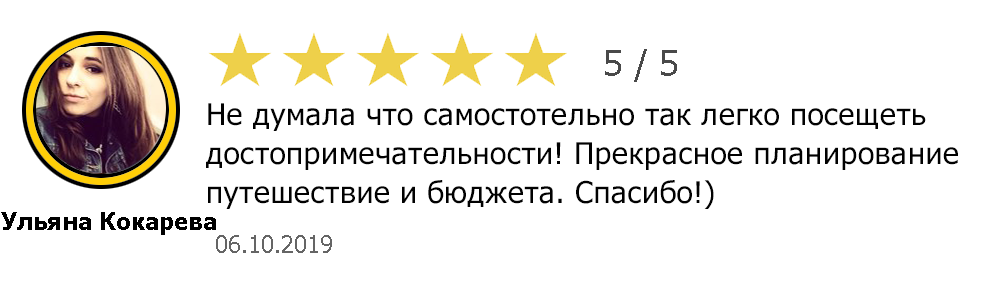
<style>
.page{position:relative;width:1001px;height:287px;background:#ffffff}
.page>*{position:absolute;margin:0}
.t1{font:36px "Tahoma";color:#494949}
.t2{font:30px/19.5px "Tahoma";letter-spacing:0.02em;color:#010101}
.t3{font:24px "Tahoma-Bold";color:#000000}
.t4{font:24px "Tahoma";color:#656565}
</style>
<div class="page">
<p class="t1" style="left:605px;top:49px;width:72px;height:33px">5 / 5</p>
<p class="t2" style="left:206px;top:103px;width:752px;height:106px">Не думала что самостотельно так легко посещеть <br><br>достопримечательности! Прекрасное планирование<br><br>путешествие и бюджета. Спасибо!)</p>
<p class="t3" style="left:1px;top:212px;width:215px;height:23px">Ульяна Кокарева</p>
<p class="t4" style="left:216px;top:235px;width:116px;height:18px">06.10.2019</p>
</div>
